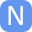
<style>
.page{position:relative;width:32px;height:32px;background:#6495ed}
.page>*{position:absolute;margin:0}
.t1{font:30px "Calibri";color:#ffffff}
</style>
<div class="page">
<p class="t1" style="left:8px;top:6px;width:15px;height:19px">N</p>
</div>
